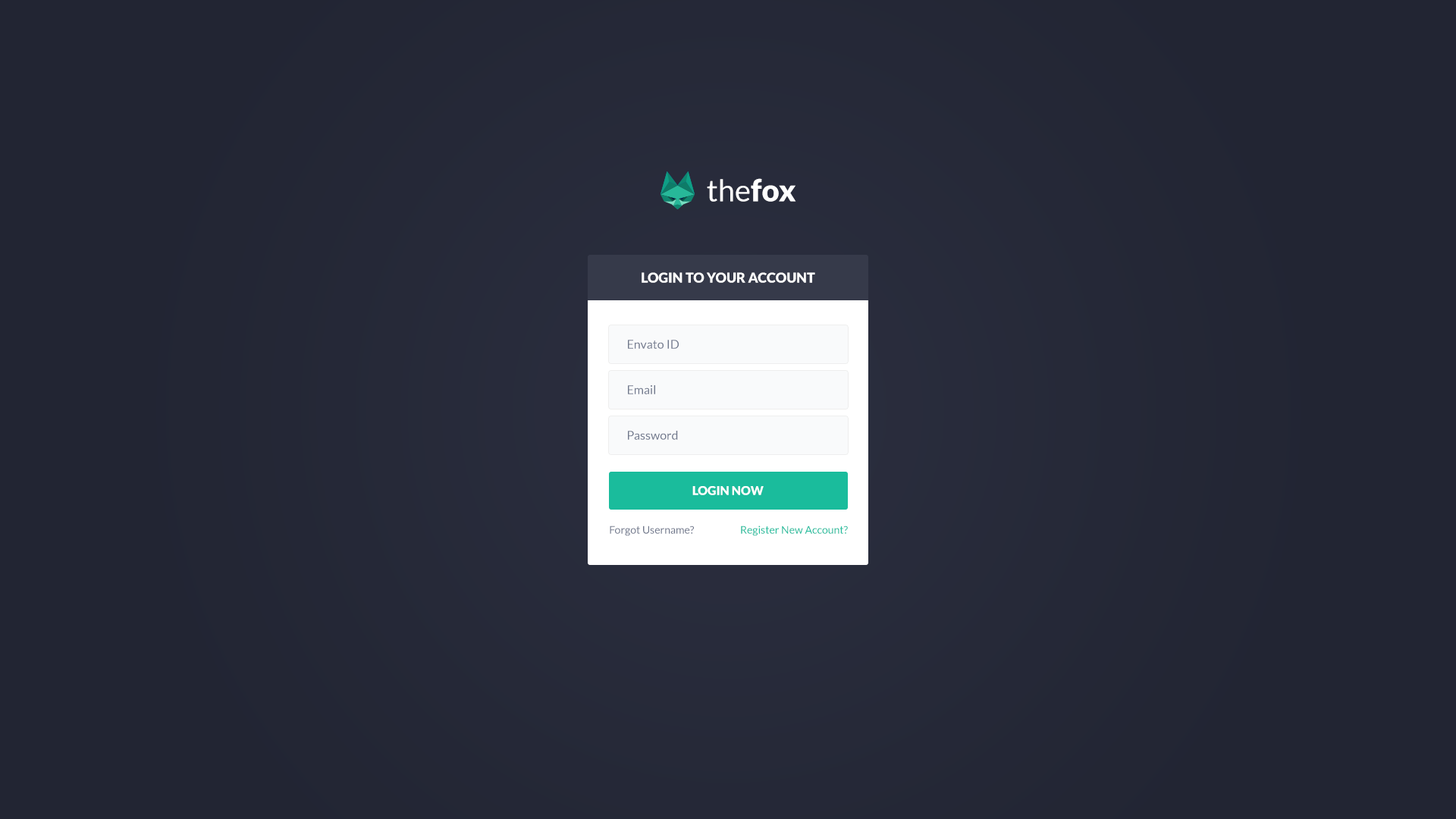
<style>
.page{position:relative;width:1456px;height:819px;background:#222533}
.page>*{position:absolute;margin:0}
.t1{font:30.3px "Lato-Regular";color:#ffffff}
.t2{font:30.3px "Lato-Black";color:#ffffff}
.t3{font:13.6px "Lato-Black";color:#ffffff;text-transform:uppercase}
.t4{font:12.1px "Lato-Regular";color:#71798d}
.t5{font:12.1px "Lato-Black";color:#ffffff}
.t6{font:10.6px "Lato-Regular";color:#71798d}
.t7{font:10.6px "Lato-Regular";color:#1abc9c}
</style>
<div class="page">
<p class="t1" style="left:707px;top:178px;width:89px;height:24px">the<span class="t2">fox</span></p>
<p class="t3" style="left:642px;top:272px;width:173px;height:11px">LOGIN TO YOUR ACCOUNT</p>
<p class="t4" style="left:628px;top:340px;width:51px;height:9px">Envato ID</p>
<p class="t4" style="left:628px;top:385px;width:27px;height:9px">Email</p>
<p class="t4" style="left:628px;top:431px;width:50px;height:9px">Password</p>
<p class="t5" style="left:692px;top:486px;width:72px;height:9px">LOGIN NOW</p>
<p class="t6" style="left:610px;top:526px;width:84px;height:10px">Forgot Username?</p>
<p class="t7" style="left:741px;top:526px;width:107px;height:10px">Register New Account?</p>
</div>
